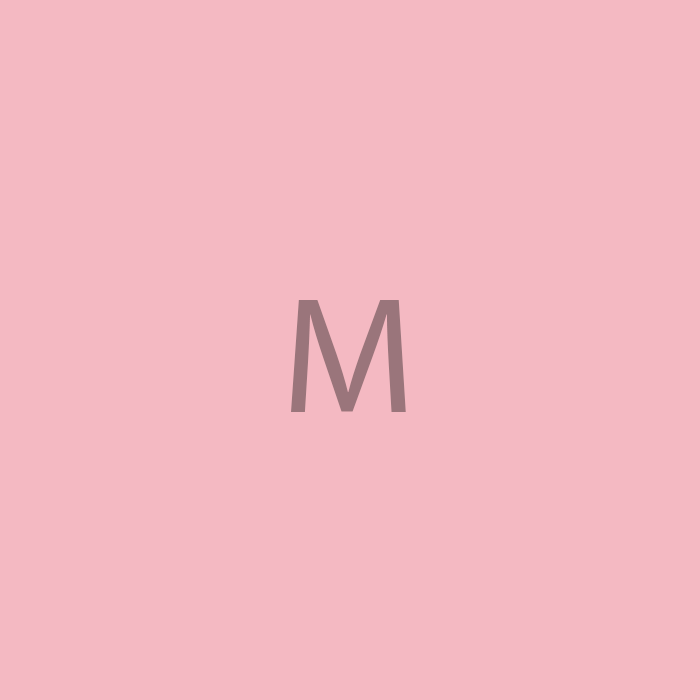
<style>
.page{position:relative;width:700px;height:700px;background:#f4b9c2}
.page>*{position:absolute;margin:0}
.t1{font:166.7px "MyriadPro-Regular";color:#9a757b}
</style>
<div class="page">
<p class="t1" style="left:291px;top:300px;width:115px;height:112px">M</p>
</div>
